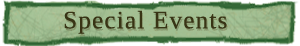
<style>
.page{position:relative;width:300px;height:46px}
.page>*{position:absolute;margin:0}
.t1{font:25px "Tinos";letter-spacing:0.05em;color:#383415}
</style>
<div class="page">
<p class="t1" style="left:64px;top:10px;width:163px;height:24px">Special Events</p>
</div>
